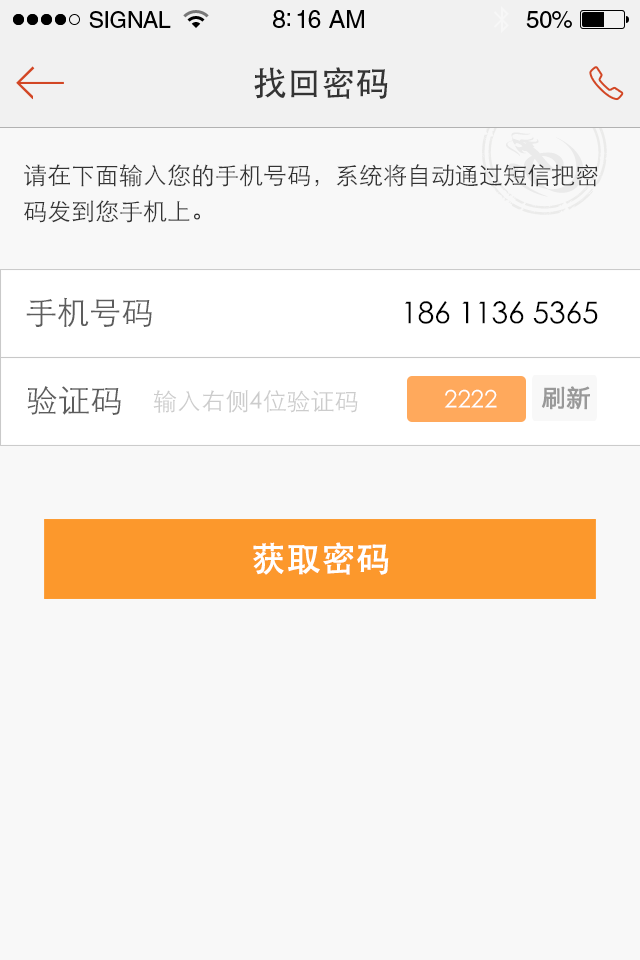
<style>
.page{position:relative;width:640px;height:960px;background:#f8f8f8}
.page>*{position:absolute;margin:0}
.t1{font:34px "STHeitiSC-Medium";color:#343434}
.t2{font:24px/36px "STHeitiSC-Light";color:#343434}
.t3{font:32px "STHeitiSC-Light";color:#5d5d5d}
.t4{font:30px "STHeitiSC-Light";color:#000000}
.t5{font:24px "STHeitiSC-Light";color:#cccccc}
.t6{font:24px "STHeitiSC-Light";color:#ffffff}
.t7{font:24px "HiraginoSansGB-W3";color:#999999;font-weight:bold}
.t8{font:34px "AdobeHeitiStd-Regular";color:#ffffff;font-weight:bold}
</style>
<div class="page">
<p class="t1" style="left:254px;top:67px;width:134px;height:32px">找回密码</p>
<p class="t2" style="left:24px;top:164px;width:574px;height:59px">请在下面输入您的手机号码，系统将自动通过短信把密<br>码发到您手机上。</p>
<p class="t3" style="left:26px;top:297px;width:126px;height:30px">手机号码</p>
<p class="t4" style="left:405px;top:301px;width:193px;height:23px">186 1136 5365</p>
<p class="t3" style="left:27px;top:386px;width:94px;height:29px">验证码</p>
<p class="t5" style="left:153px;top:390px;width:205px;height:23px">输入右侧4位验证码</p>
<p class="t6" style="left:444px;top:389px;width:53px;height:19px">2222</p>
<p class="t7" style="left:541px;top:386px;width:49px;height:24px">刷新</p>
<p class="t8" style="left:253px;top:542px;width:136px;height:33px">获取密码</p>
</div>
